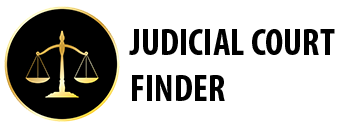
<style>
.page{position:relative;width:364px;height:128px;background:#ffffff}
.page>*{position:absolute;margin:0}
.t1{font:38px "MyriadPro-BoldCond";color:#000000}
</style>
<div class="page">
<p class="t1" style="left:129px;top:29px;width:206px;height:72px">JUDICIAL COURT<br>FINDER</p>
</div>
